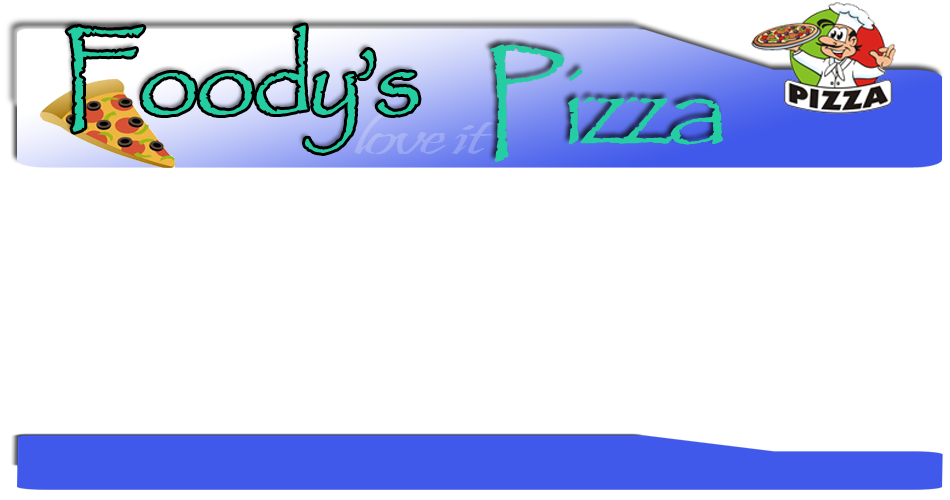
<style>
.page{position:relative;width:950px;height:500px;background:#ffffff}
.page>*{position:absolute;margin:0}
.t1{font:109.4px "Papyrus-Regular";letter-spacing:-0.06em;color:#25cda3}
.t2{font:120.4px "Papyrus-Regular";letter-spacing:-0.06em;color:#25cda3;scale:1.08 1}
</style>
<div class="page">
<p class="t1" style="left:67px;top:25px;width:352px;height:128px">Foody’s</p>
<p class="t2" style="left:490px;top:44px;width:234px;height:118px">Pizza</p>
</div>
